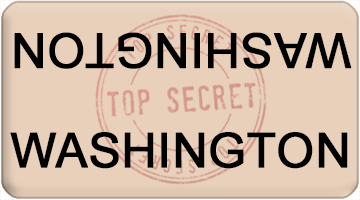
<style>
.page{position:relative;width:360px;height:200px;background:#e8d0bb}
.page>*{position:absolute;margin:0}
.t1{font:48px "ArialMT";color:#000000;font-weight:bold}
</style>
<div class="page">
<p class="t1" style="left:14px;top:32px;width:338px;height:37px;rotate:180deg">WASHINGTON</p>
<p class="t1" style="left:10px;top:132px;width:338px;height:37px">WASHINGTON</p>
</div>
